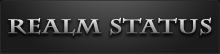
<style>
.page{position:relative;width:220px;height:54px}
.page>*{position:absolute;margin:0}
.t1{font:19.5px "CharlemagneStd-Bold";font-weight:bold;scale:1.25 1}
</style>
<div class="page">
<p class="t1" style="left:8px;top:17px;width:204px;height:19px">Realm Status</p>
</div>
